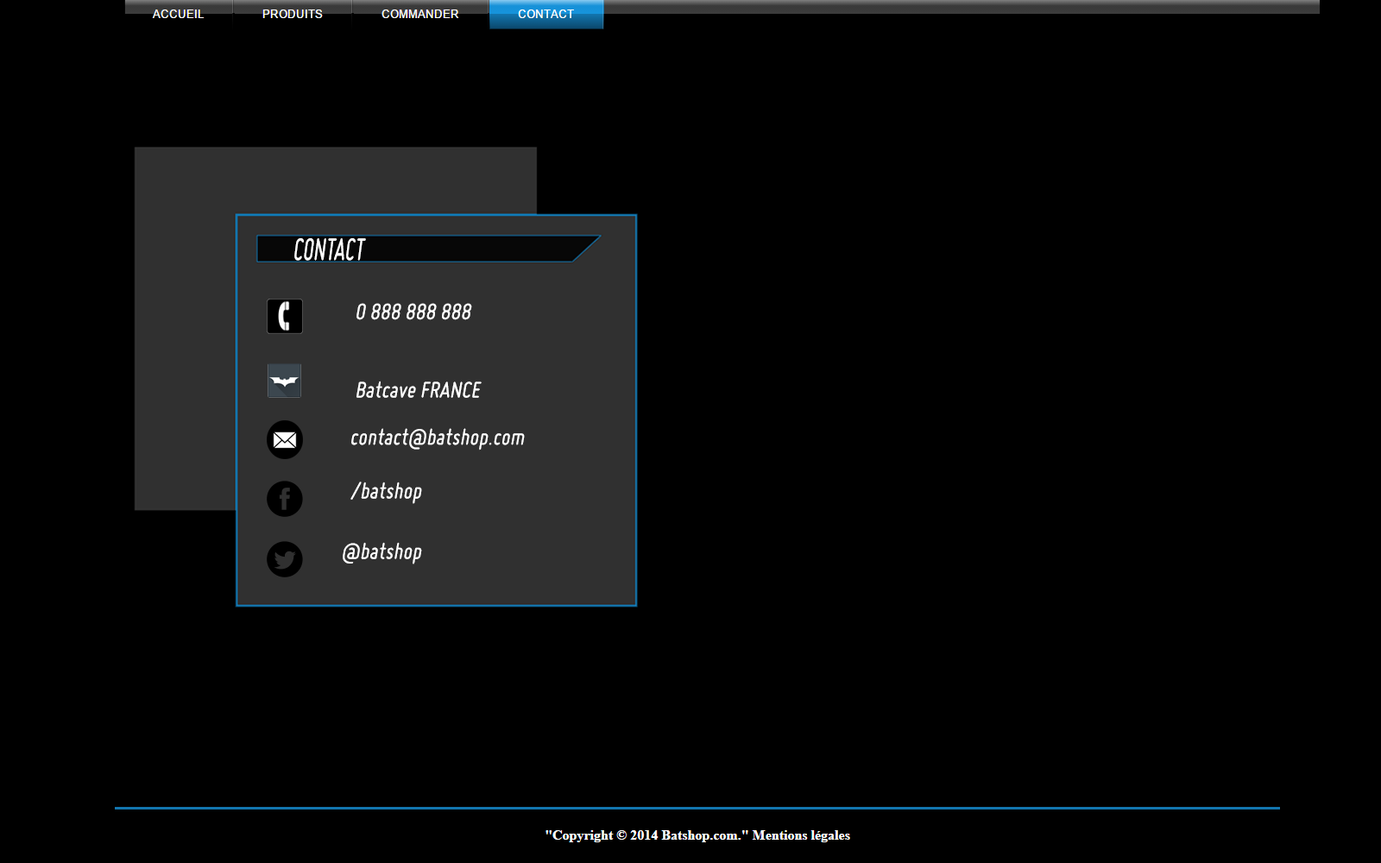
<style>
.page{position:relative;width:1381px;height:863px;background:#000000}
.page>*{position:absolute;margin:0}
.t1{font:34px "Miso";color:#ffffff;font-style:italic;scale:0.74 1}
.t2{font:24.5px "Miso";color:#ffffff;font-style:italic}
.t3{font:28.8px "Miso";color:#ffffff;font-style:italic}
</style>
<div class="page">
<p class="t1" style="left:294px;top:238px;width:72px;height:23px">CONTACT</p>
<p class="t2" style="left:357px;top:303px;width:115px;height:17px"><span class="t3">  </span>0 888 888 888</p>
<p class="t2" style="left:357px;top:381px;width:125px;height:17px">Batcave FRANCE</p>
<p class="t2" style="left:351px;top:428px;width:174px;height:23px">contact@batshop.com@</p>
<p class="t2" style="left:350px;top:482px;width:72px;height:22px">/batshop</p>
<p class="t2" style="left:343px;top:542px;width:79px;height:23px">@batshop</p>
</div>
